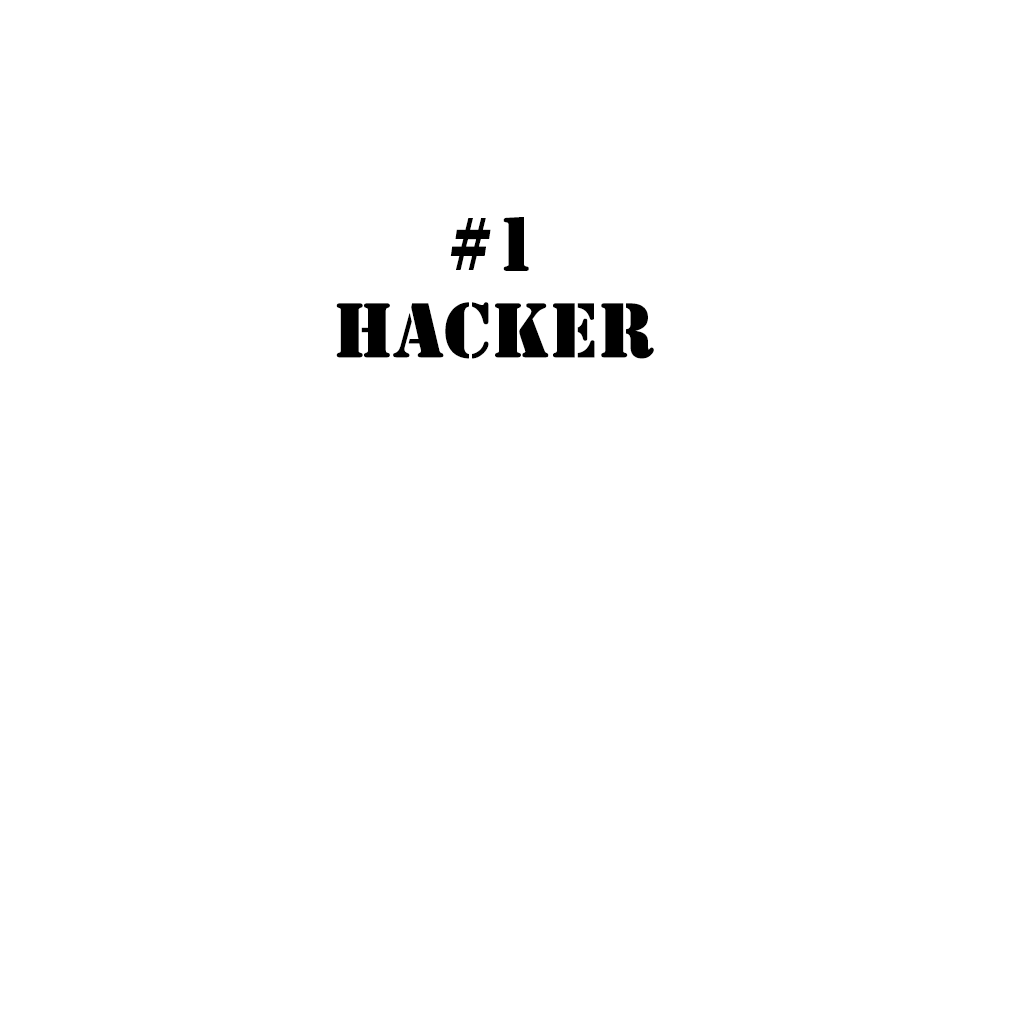
<style>
.page{position:relative;width:1024px;height:1024px;background:#ffffff}
.page>*{position:absolute;margin:0}
.t1{font:72px "StencilStd";color:#000000}
</style>
<div class="page">
<p class="t1" style="left:336px;top:217px;width:318px;height:142px;text-align:center">#1<br>Hacker</p>
</div>
